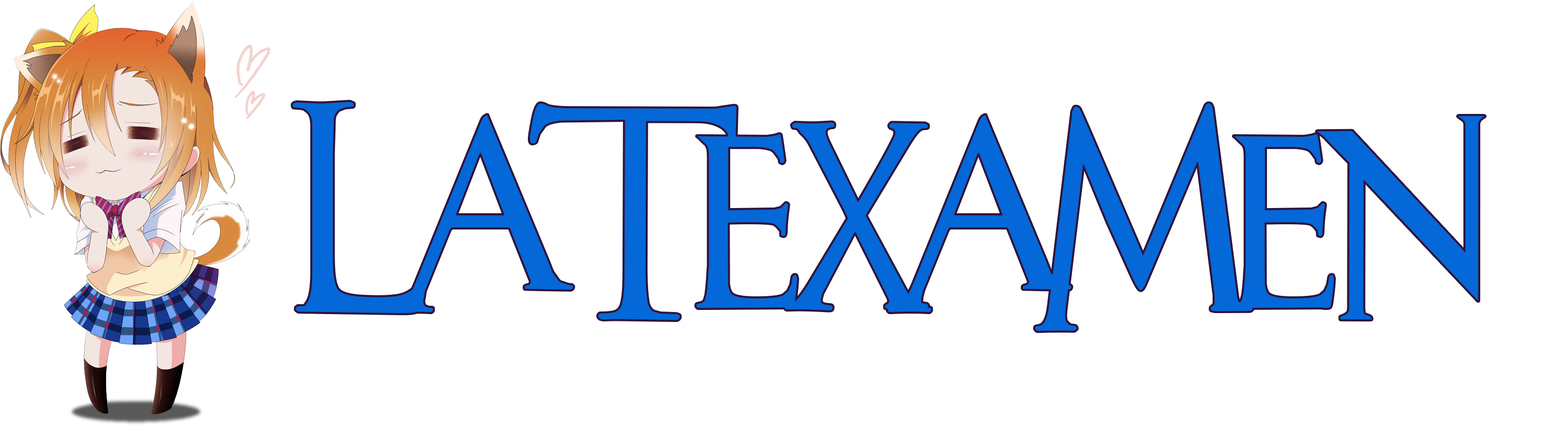
<style>
.page{position:relative;width:1568px;height:426px;background:#ffffff}
.page>*{position:absolute;margin:0}
.t1{font:130.7px "AnUnfortunateEvent";color:#0568d8}
</style>
<div class="page">
<p class="t1" style="left:293px;top:102px;width:1192px;height:229px">LaTeXaMeN</p>
</div>
